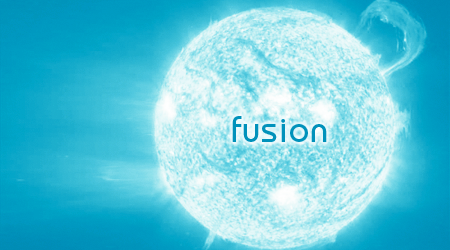
<style>
.page{position:relative;width:450px;height:250px}
.page>*{position:absolute;margin:0}
.t1{font:36px "Bauhaus-Medium";letter-spacing:0.03em;color:#0092bb}
</style>
<div class="page">
<p class="t1" style="left:232px;top:116px;width:95px;height:26px">fusion</p>
</div>
